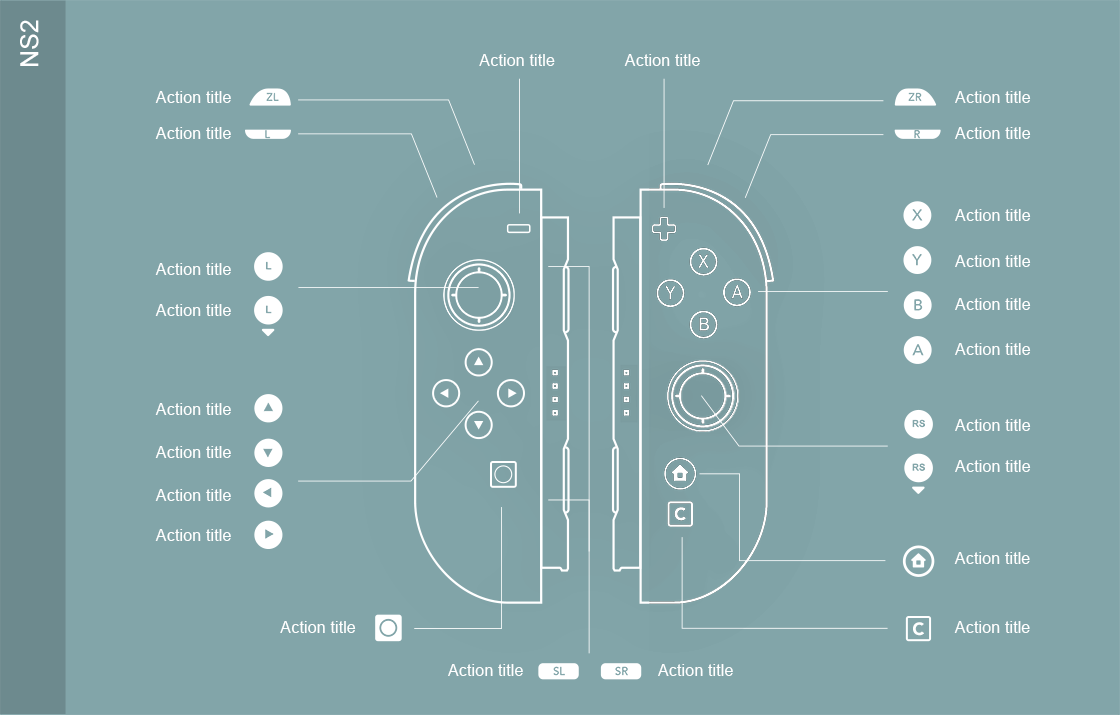
<style>
.page{position:relative;width:1120px;height:715px;background:#82a5a9}
.page>*{position:absolute;margin:0}
.t1{font:25px "ArialMT";color:#ffffff}
.t2{font:16.4px "ArialMT";color:#ffffff}
.t3{font:17.6px "Avenir-Black";letter-spacing:0.01em;color:#ffffff}
</style>
<div class="page">
<p class="t1" style="left:20px;top:20px;width:19px;height:46px;rotate:-90deg">NS2</p>
<p class="t2" style="left:479px;top:54px;width:76px;height:12px">Action title</p>
<p class="t2" style="left:624px;top:54px;width:76px;height:12px">Action title</p>
<p class="t2" style="left:155px;top:91px;width:76px;height:12px">Action title</p>
<p class="t2" style="left:955px;top:91px;width:76px;height:12px">Action title</p>
<p class="t2" style="left:155px;top:127px;width:76px;height:12px">Action title</p>
<p class="t2" style="left:955px;top:127px;width:76px;height:12px">Action title</p>
<p class="t2" style="left:955px;top:209px;width:76px;height:12px">Action title</p>
<p class="t2" style="left:955px;top:255px;width:76px;height:12px">Action title</p>
<p class="t2" style="left:155px;top:263px;width:76px;height:12px">Action title</p>
<p class="t2" style="left:155px;top:304px;width:76px;height:12px">Action title</p>
<p class="t2" style="left:955px;top:298px;width:76px;height:12px">Action title</p>
<p class="t2" style="left:955px;top:343px;width:76px;height:12px">Action title</p>
<p class="t2" style="left:155px;top:403px;width:76px;height:12px">Action title</p>
<p class="t2" style="left:955px;top:419px;width:76px;height:12px">Action title</p>
<p class="t2" style="left:155px;top:446px;width:76px;height:12px">Action title</p>
<p class="t2" style="left:955px;top:460px;width:76px;height:12px">Action title</p>
<p class="t2" style="left:155px;top:489px;width:76px;height:12px">Action title</p>
<p class="t3" style="left:674px;top:507px;width:12px;height:14px">C</p>
<p class="t2" style="left:155px;top:529px;width:76px;height:12px">Action title</p>
<p class="t2" style="left:954px;top:552px;width:76px;height:12px">Action title</p>
<p class="t2" style="left:280px;top:621px;width:76px;height:12px">Action title</p>
<p class="t3" style="left:913px;top:622px;width:11px;height:14px">C</p>
<p class="t2" style="left:954px;top:621px;width:76px;height:12px">Action title</p>
<p class="t2" style="left:448px;top:664px;width:75px;height:12px">Action title</p>
<p class="t2" style="left:658px;top:664px;width:75px;height:12px">Action title</p>
</div>
